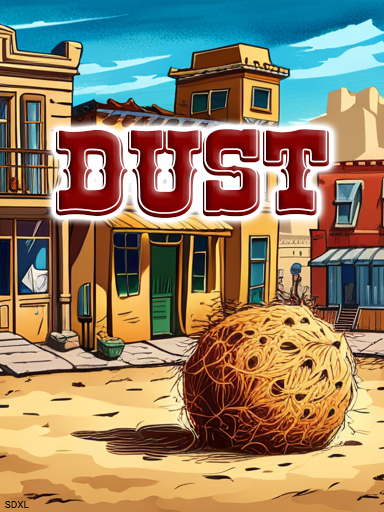
<style>
.page{position:relative;width:384px;height:512px}
.page>*{position:absolute;margin:0}
.t1{font:123px "RioGrande-Bold"}
</style>
<div class="page">
<p class="t1" style="left:56px;top:129px;width:273px;height:89px">DUST</p>
</div>
